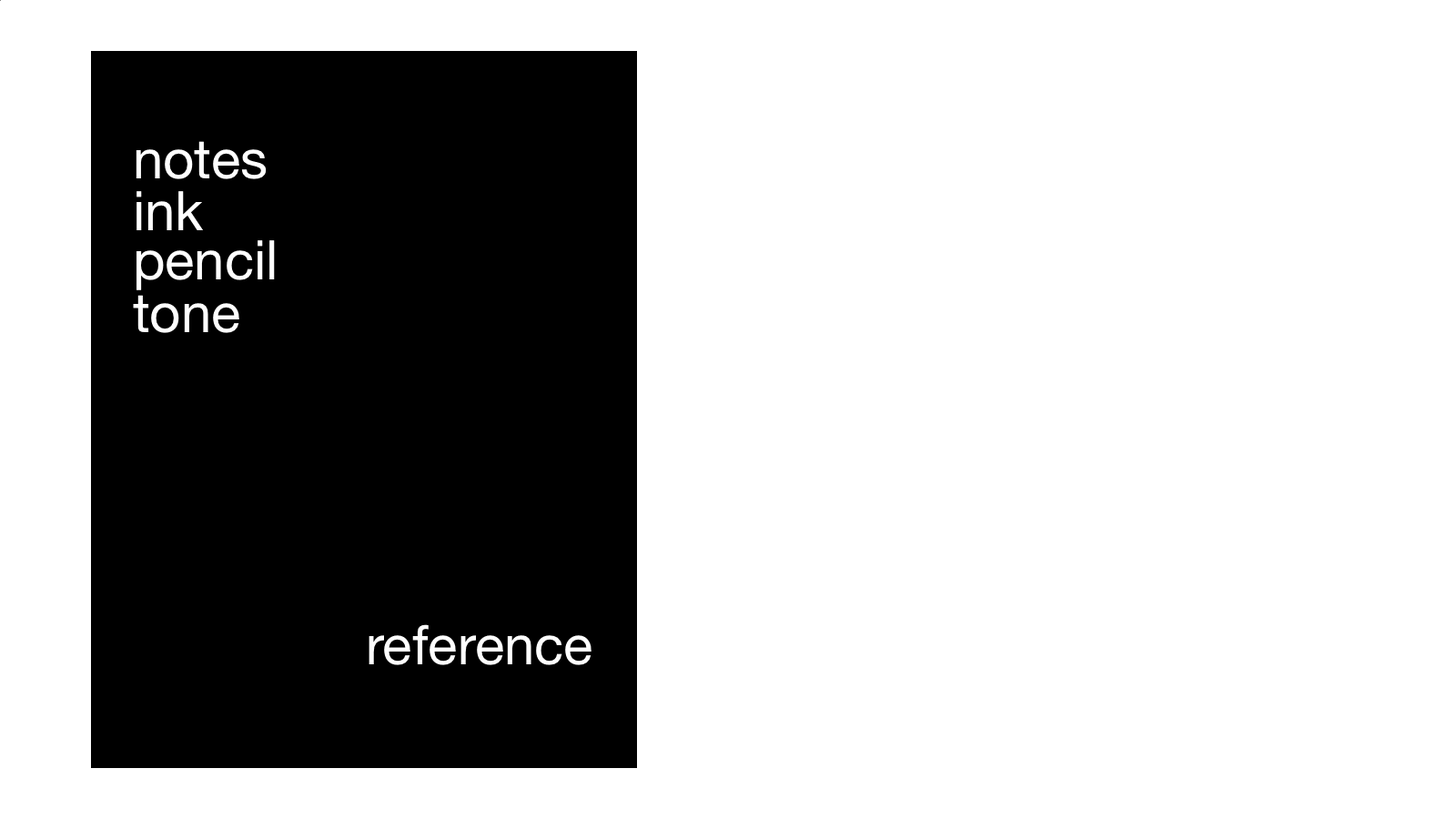
<style>
.page{position:relative;width:1456px;height:819px;background:#ffffff}
.page>*{position:absolute;margin:0}
.t1{font:54.6px "HelveticaNeue";color:#ffffff}
</style>
<div class="page">
<p class="t1" style="left:136px;top:141px;width:131px;height:38px">notes</p>
<p class="t1" style="left:136px;top:191px;width:67px;height:39px">ink</p>
<p class="t1" style="left:136px;top:240px;width:139px;height:50px">pencil</p>
<p class="t1" style="left:133px;top:295px;width:106px;height:38px">tone</p>
<p class="t1" style="left:369px;top:624px;width:222px;height:41px">reference</p>
</div>
